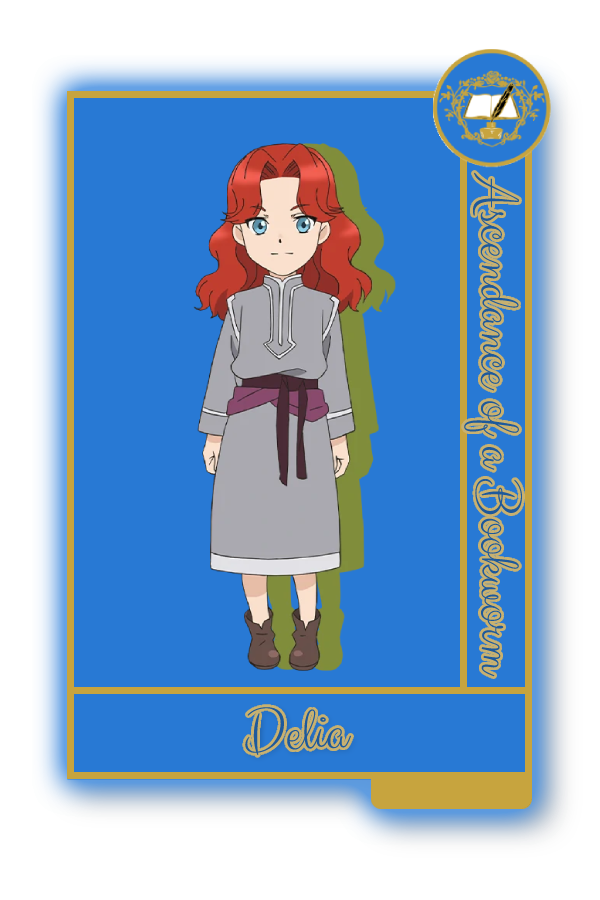
<style>
.page{position:relative;width:600px;height:900px;background:#2879d4}
.page>*{position:absolute;margin:0}
.t1{font:58px "ClickerScript-Regular";color:#1d599c}
.t2{font:60px "ClickerScript-Regular";color:#1d599c}
</style>
<div class="page">
<p class="t1" style="left:464px;top:172px;width:59px;height:505px;rotate:90deg">Ascendance of a Bookworm</p>
<p class="t2" style="left:245px;top:707px;width:107px;height:48px">Delia</p>
</div>
